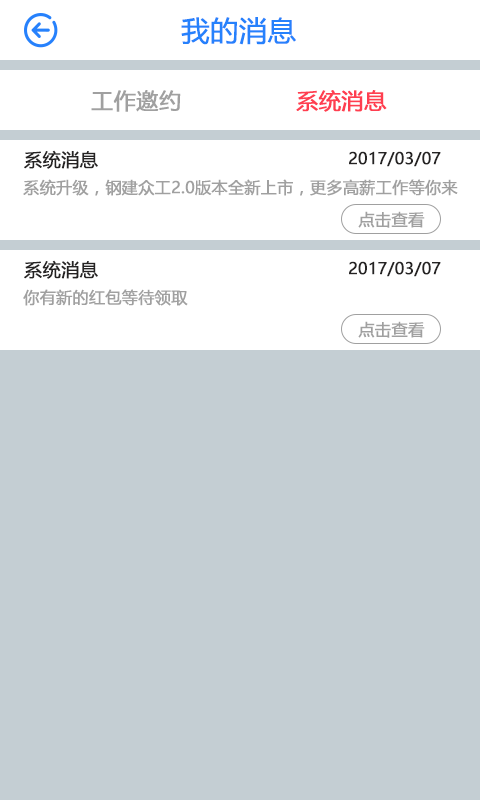
<style>
.page{position:relative;width:480px;height:800px;background:#c4ced3}
.page>*{position:absolute;margin:0}
.t1{font:28px "MicrosoftYaHei";color:#2681fc;font-weight:bold}
.t2{font:22px "MicrosoftYaHei";color:#a0a0a0;font-weight:bold}
.t3{font:22px "MicrosoftYaHei";color:#ff3e50;font-weight:bold}
.t4{font:18px "MicrosoftYaHei";color:#252323;font-weight:bold}
.t5{font:16px "MicrosoftYaHei";color:#252323;font-weight:bold}
.t6{font:16px "MicrosoftYaHei";color:#a0a0a0;font-weight:bold}
</style>
<div class="page">
<p class="t1" style="left:181px;top:17px;width:115px;height:28px">我的消息</p>
<p class="t2" style="left:91px;top:90px;width:90px;height:22px">工作邀约</p>
<p class="t3" style="left:296px;top:90px;width:91px;height:22px">系统消息</p>
<p class="t4" style="left:24px;top:150px;width:74px;height:19px">系统消息</p>
<p class="t5" style="left:349px;top:151px;width:92px;height:16px">2017/03/07</p>
<p class="t6" style="left:23px;top:179px;width:435px;height:17px">系统升级，钢建众工2.0版本全新上市，更多高薪工作等你来</p>
<p class="t6" style="left:358px;top:211px;width:67px;height:17px">点击查看</p>
<p class="t4" style="left:24px;top:260px;width:74px;height:19px">系统消息</p>
<p class="t5" style="left:349px;top:261px;width:92px;height:16px">2017/03/07</p>
<p class="t6" style="left:23px;top:289px;width:165px;height:17px">你有新的红包等待领取</p>
<p class="t6" style="left:358px;top:321px;width:67px;height:17px">点击查看</p>
</div>
